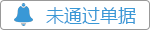
<style>
.page{position:relative;width:150px;height:30px;background:#ffffff}
.page>*{position:absolute;margin:0}
.t1{font:18px "MicrosoftYaHei";color:#3998d6}
</style>
<div class="page">
<p class="t1" style="left:46px;top:7px;width:90px;height:17px">未通过单据</p>
</div>
